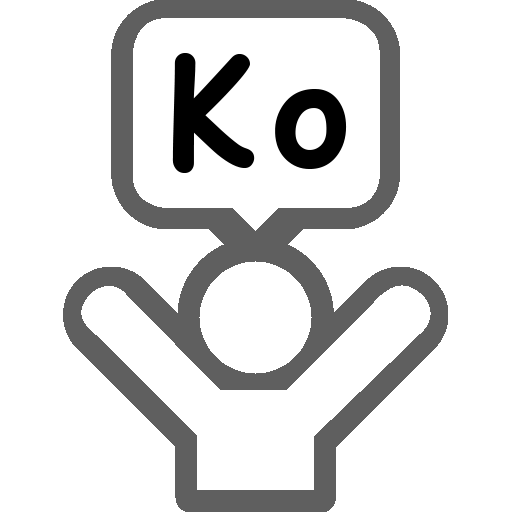
<style>
.page{position:relative;width:512px;height:512px;background:#ffffff}
.page>*{position:absolute;margin:0}
.t1{font:150px "ComicSansMS-Bold";letter-spacing:0.1em;color:#000000}
</style>
<div class="page">
<p class="t1" style="left:172px;top:53px;width:175px;height:120px">Ko</p>
</div>
